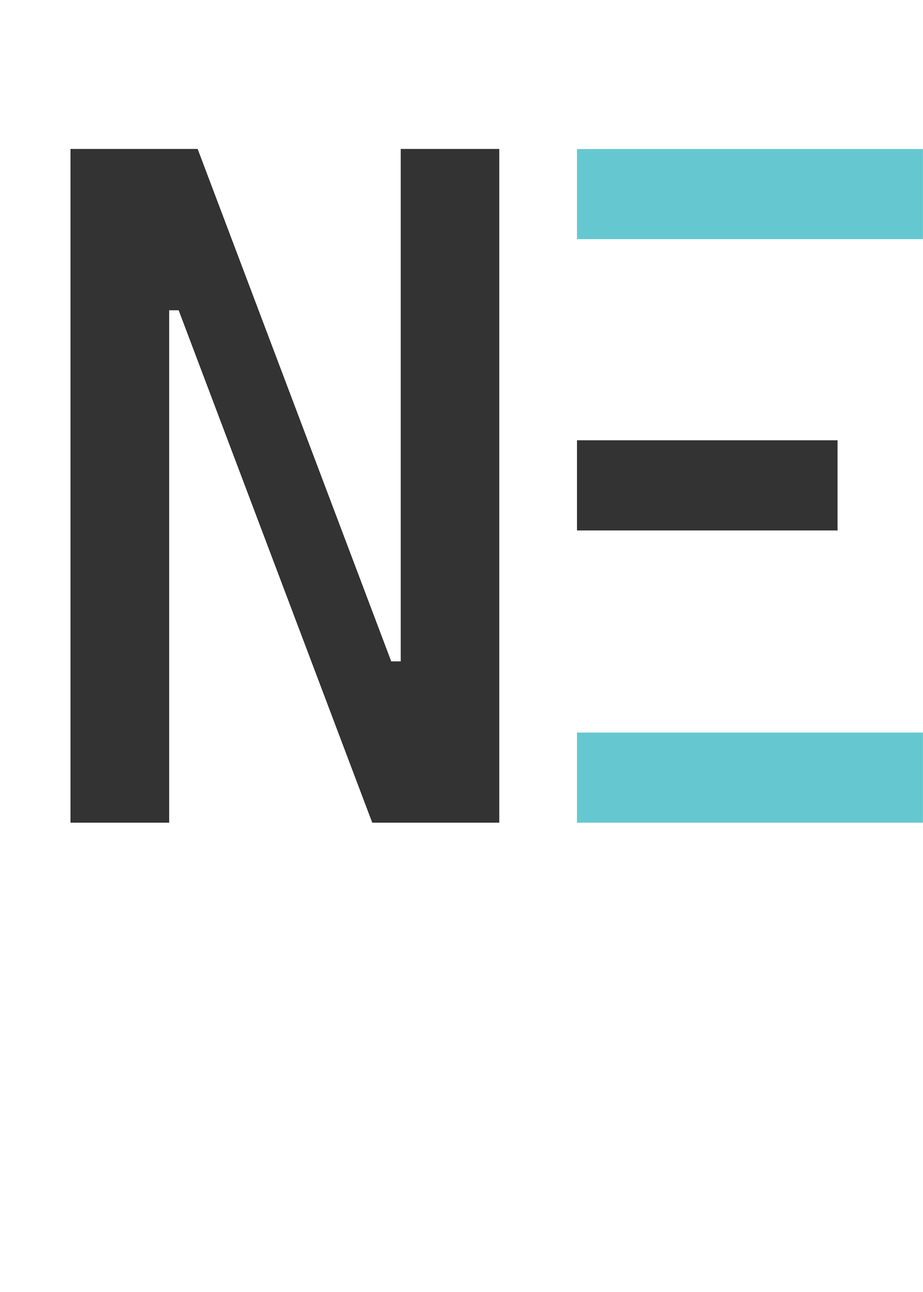
<style>
.page{position:relative;width:923px;height:1292px;background:#ffffff}
.page>*{position:absolute;margin:0}
.t1{font:971.6px "CascadiaMono-Regular";color:#333333}
</style>
<div class="page">
<p class="t1" style="left:70px;top:149px;width:430px;height:674px">N</p>
</div>
